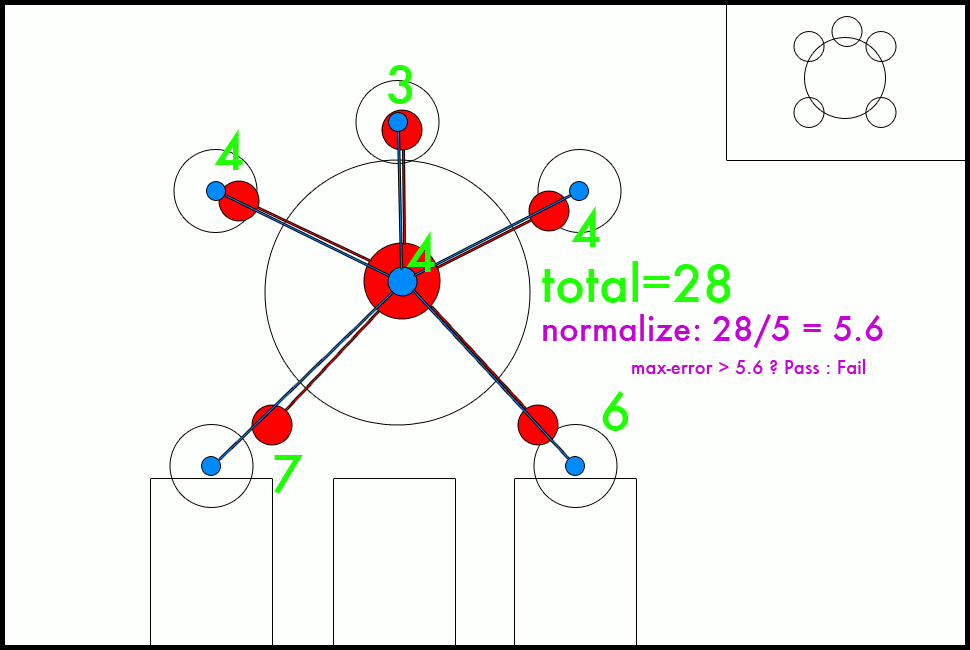
<style>
.page{position:relative;width:970px;height:650px;background:#fdfffd}
.page>*{position:absolute;margin:0}
.t1{font:50.1px "Futura-Medium";color:#21ff03}
.t2{font:33.4px "Futura-Medium";color:#c404d5}
.t3{font:18.4px "Futura-Medium";color:#c404d5}
</style>
<div class="page">
<p class="t1" style="left:388px;top:65px;width:25px;height:39px">3</p>
<p class="t1" style="left:214px;top:129px;width:29px;height:41px">4</p>
<p class="t1" style="left:571px;top:206px;width:29px;height:41px">4</p>
<p class="t1" style="left:406px;top:231px;width:29px;height:41px">4</p>
<p class="t1" style="left:542px;top:261px;width:189px;height:42px">total=28</p>
<p class="t2" style="left:543px;top:314px;width:340px;height:34px">normalize: 28/5 = 5.6</p>
<p class="t3" style="left:632px;top:359px;width:234px;height:15px">max-error &gt; 5.6 ? Pass : Fail</p>
<p class="t1" style="left:602px;top:391px;width:27px;height:40px">6</p>
<p class="t1" style="left:274px;top:455px;width:29px;height:39px">7</p>
</div>
